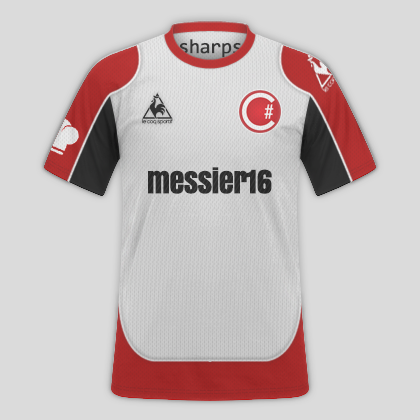
<style>
.page{position:relative;width:420px;height:420px;background:#dbdbdb}
.page>*{position:absolute;margin:0}
.t1{font:20px "Consolas";letter-spacing:-0.04em;color:#383837;font-weight:bold}
.t2{font:30px "Anton";letter-spacing:-0.04em;color:#303030;font-weight:bold}
</style>
<div class="page">
<p class="t1" style="left:179px;top:39px;width:63px;height:19px">sharpsps</p>
<p class="t2" style="left:148px;top:167px;width:124px;height:27px">messier16</p>
</div>
